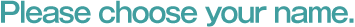
<style>
.page{position:relative;width:355px;height:27px;background:#ffffff}
.page>*{position:absolute;margin:0}
.t1{font:28px "GothicMB101Pro-DeBold";letter-spacing:-0.05em;color:#409e9f;scale:0.95 1}
</style>
<div class="page">
<p class="t1" style="left:1px;top:0px;width:353px;height:27px">Please choose your name.</p>
</div>
